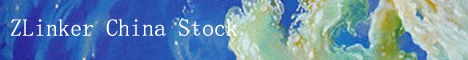
<style>
.page{position:relative;width:468px;height:60px}
.page>*{position:absolute;margin:0}
.t1{font:24px "YouYuan";color:#ffffff}
</style>
<div class="page">
<p class="t1" style="left:10px;top:18px;width:228px;height:18px">ZLinker China Stock</p>
</div>
